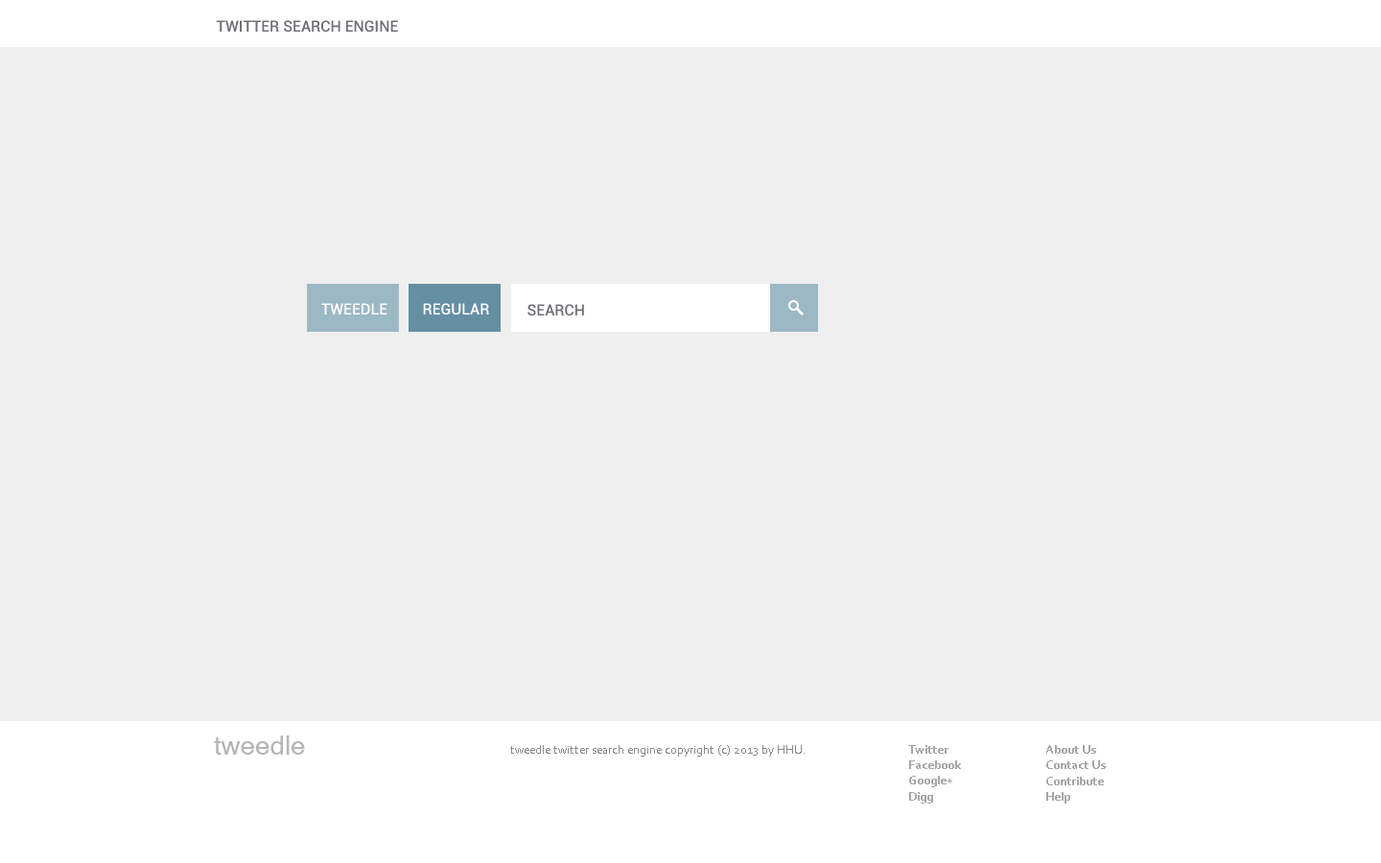
<style>
.page{position:relative;width:1381px;height:863px;background:#efefef}
.page>*{position:absolute;margin:0}
.t1{font:15.3px "Roboto-Medium";color:#6d6e76;text-transform:uppercase}
.t2{font:15.3px "Roboto-Medium";color:#ffffff}
.t3{font:15.3px "Roboto-Medium";color:#6d6e76}
.t4{font:28.8px "Gautami";color:#b5b5b5}
.t5{font:12.5px "Corbel";color:#8c8c8c}
.t6{font:12.5px "Corbel-Bold";color:#a6a6a6}
</style>
<div class="page">
<p class="t1" style="left:216px;top:20px;width:182px;height:12px">TWITTER SEARCH ENGINE</p>
<p class="t2" style="left:321px;top:303px;width:67px;height:12px">TWEEDLE</p>
<p class="t2" style="left:423px;top:303px;width:66px;height:12px">REGULAR</p>
<p class="t3" style="left:528px;top:304px;width:56px;height:12px">SEARCH</p>
<p class="t4" style="left:214px;top:736px;width:91px;height:19px">tweedle</p>
<p class="t5" style="left:510px;top:745px;width:295px;height:12px">tweedle twitter search engine copyright (c) 2013 by HHU.</p>
<p class="t6" style="left:908px;top:745px;width:41px;height:9px">Twitter</p>
<p class="t6" style="left:1046px;top:745px;width:50px;height:9px">About Us</p>
<p class="t6" style="left:909px;top:761px;width:52px;height:8px">Facebook</p>
<p class="t6" style="left:1046px;top:761px;width:60px;height:8px">Contact Us</p>
<p class="t6" style="left:909px;top:776px;width:43px;height:12px">Google+</p>
<p class="t6" style="left:1046px;top:777px;width:58px;height:9px">Contribute</p>
<p class="t6" style="left:909px;top:792px;width:24px;height:12px">Digg</p>
<p class="t6" style="left:1046px;top:792px;width:24px;height:12px">Help</p>
</div>
